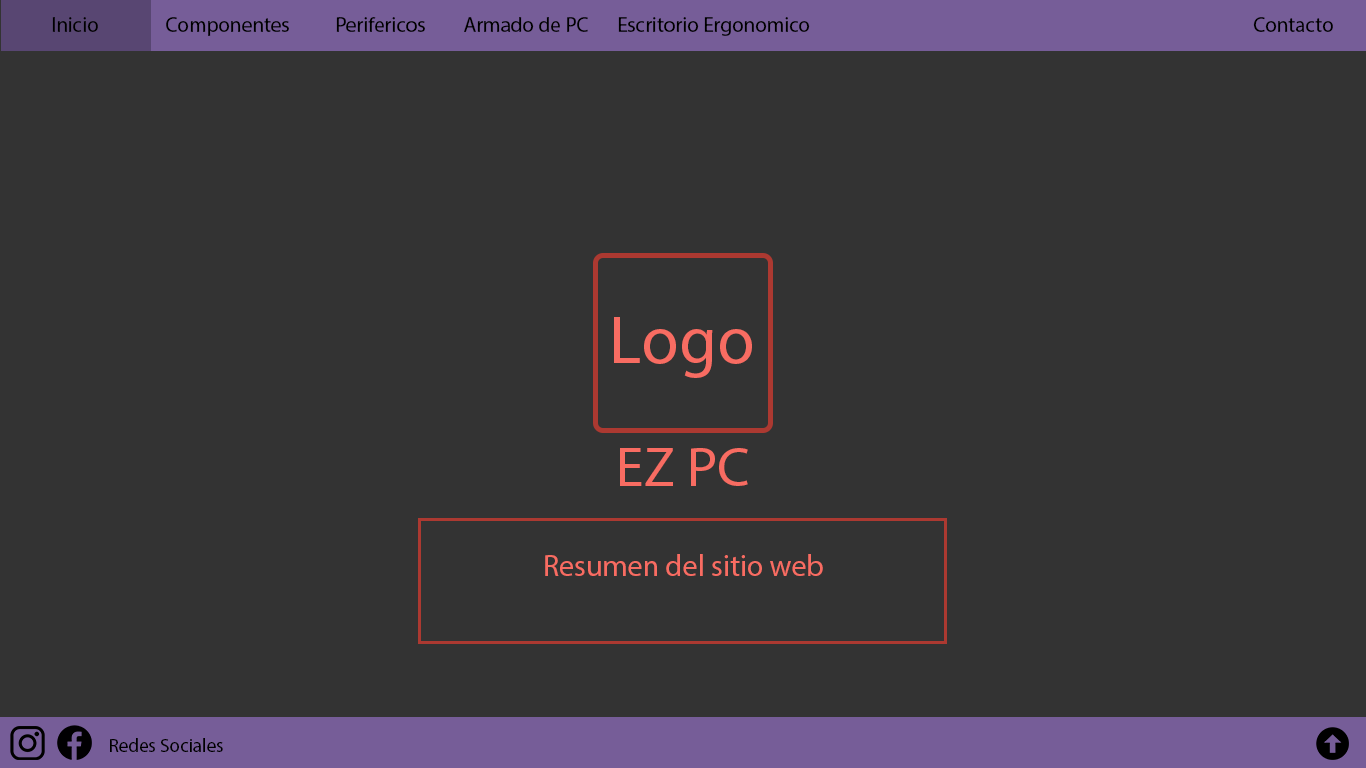
<style>
.page{position:relative;width:1366px;height:768px;background:#333333}
.page>*{position:absolute;margin:0}
.t1{font:21px "MyriadPro-Regular";color:#000000}
.t2{font:68.7px "MyriadPro-Regular";color:#f86c62}
.t3{font:56px "MyriadPro-Regular";color:#f86c62}
.t4{font:30px "MyriadPro-Regular";color:#f86c62}
.t5{font:19px "MyriadPro-Regular";color:#000000}
</style>
<div class="page">
<p class="t1" style="left:52px;top:17px;width:46px;height:15px">Inicio</p>
<p class="t1" style="left:166px;top:17px;width:123px;height:19px">Componentes</p>
<p class="t1" style="left:336px;top:17px;width:89px;height:15px">Perifericos</p>
<p class="t1" style="left:464px;top:17px;width:124px;height:15px">Armado de PC</p>
<p class="t1" style="left:618px;top:17px;width:192px;height:19px">Escritorio Ergonomico</p>
<p class="t1" style="left:1253px;top:17px;width:80px;height:15px">Contacto</p>
<p class="t2" style="left:614px;top:317px;width:138px;height:61px">Logo</p>
<p class="t3" style="left:620px;top:448px;width:128px;height:38px">EZ PC</p>
<p class="t4" style="left:545px;top:554px;width:278px;height:22px">Resumen del sitio web</p>
<p class="t5" style="left:110px;top:738px;width:113px;height:14px">Redes Sociales</p>
</div>
